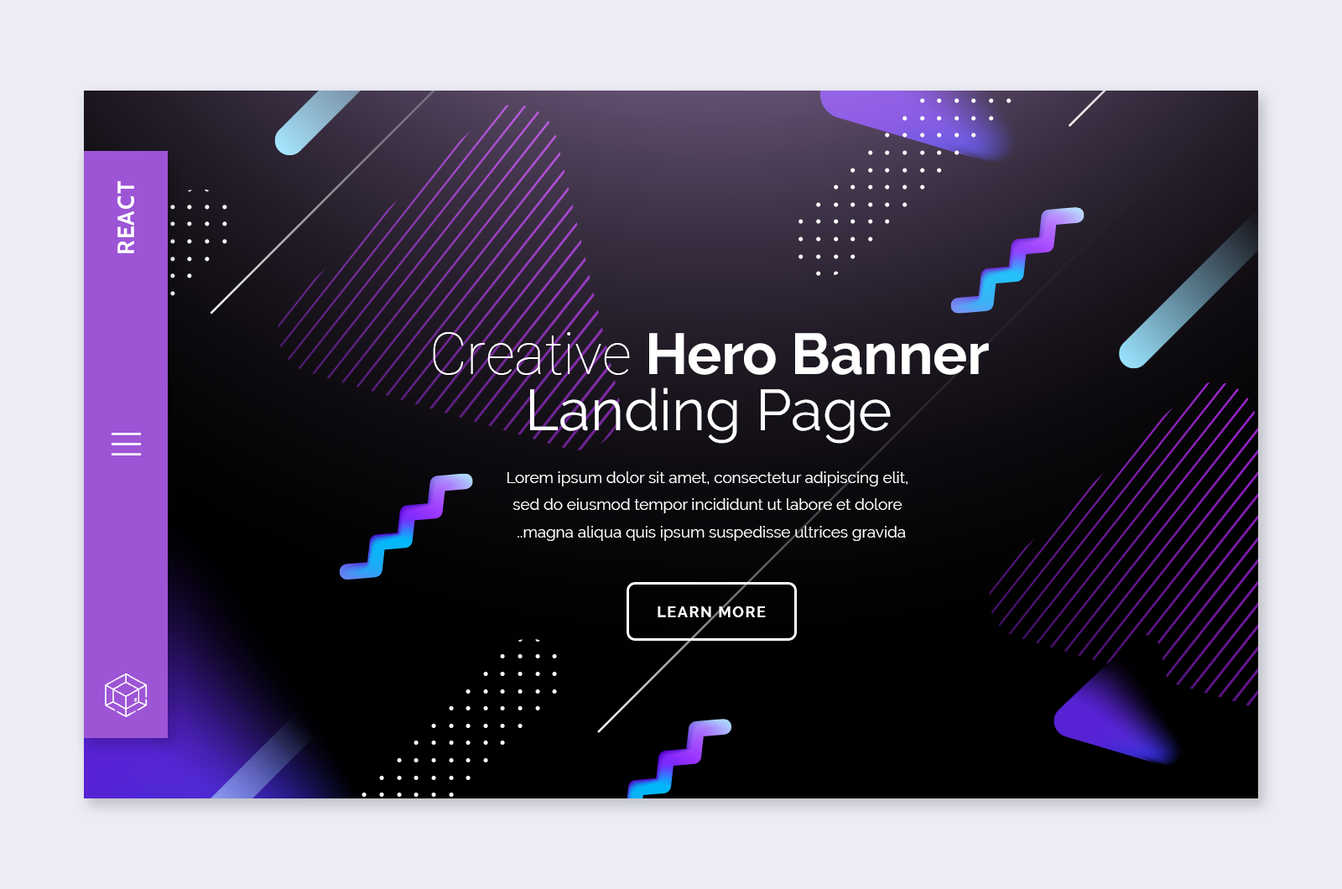
<style>
.page{position:relative;width:1342px;height:889px;background:#ececf5}
.page>*{position:absolute;margin:0}
.t1{font:23.5px "Cabin-Bold";letter-spacing:0.05em;color:#ffffff;text-transform:uppercase}
.t2{font:57.7px/56.3px "Raleway-Regular";color:#ffffff}
.t3{font:57.7px/56.3px "Roboto-Thin";color:#ffffff}
.t4{font:57.7px/56.3px "Raleway-Bold";color:#ffffff}
.t5{font:15.8px/27.2px "Raleway-Regular";color:#ffffff}
.t6{font:14.9px "Raleway-Bold";letter-spacing:0.1em;color:#ffffff;text-transform:uppercase}
</style>
<div class="page">
<p class="t1" style="left:117px;top:181px;width:17px;height:72px;rotate:-90deg">React</p>
<p class="t2" style="left:433px;top:332px;width:556px;height:112px;text-align:center"><span class="t3">Creative</span><span class="t4"> Hero Banner<br></span>Landing Page</p>
<p class="t5" style="left:507px;top:471px;width:400px;height:70px;text-align:center">Lorem ipsum dolor sit amet, consectetur adipiscing elit, sed do eiusmod tempor incididunt ut labore et dolore magna aliqua quis ipsum suspedisse ultrices gravida..</p>
<p class="t6" style="left:657px;top:606px;width:109px;height:11px">Learn More</p>
</div>
